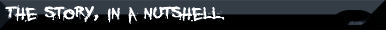
<style>
.page{position:relative;width:386px;height:30px;background:#000001}
.page>*{position:absolute;margin:0}
.t1{font:25.2px "YouMurdererBB";color:#ffffff;scale:1.16 1}
</style>
<div class="page">
<p class="t1" style="left:5px;top:5px;width:220px;height:20px">The story, in a nutshell.</p>
</div>
